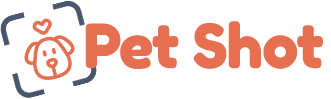
<style>
.page{position:relative;width:331px;height:99px;background:#ffffff}
.page>*{position:absolute;margin:0}
.t1{font:60px "FredokaOne-Regular";letter-spacing:-0.04em;color:#e76f51;font-weight:bold}
</style>
<div class="page">
<p class="t1" style="left:85px;top:21px;width:238px;height:48px">Pet Shot</p>
</div>
